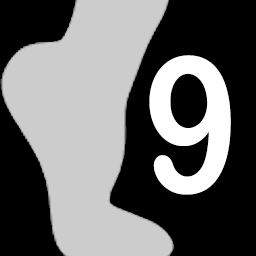
<style>
.page{position:relative;width:256px;height:256px;background:#000000}
.page>*{position:absolute;margin:0}
.t1{font:189.8px "ArialRoundedMTBold";color:#ffffff;font-variant:small-caps;scale:0.83 1}
</style>
<div class="page">
<p class="t1" style="left:149px;top:55px;width:82px;height:140px">9</p>
</div>
